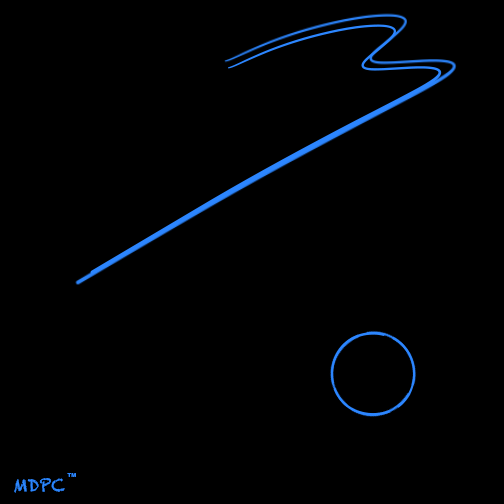
<style>
.page{position:relative;width:504px;height:504px;background:#000000}
.page>*{position:absolute;margin:0}
.t1{font:5.9px "ArialRoundedMTBold";color:#2c87ff}
.t2{font:16.9px "Chalkduster";color:#2c87ff}
</style>
<div class="page">
<p class="t1" style="left:67px;top:473px;width:9px;height:4px">TM</p>
<p class="t2" style="left:14px;top:478px;width:51px;height:15px">MDPC</p>
</div>
